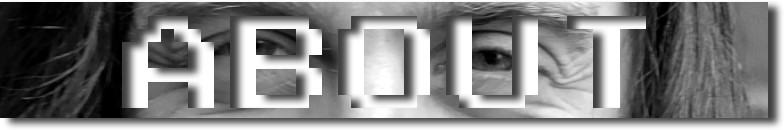
<style>
.page{position:relative;width:784px;height:130px}
.page>*{position:absolute;margin:0}
.t1{font:105.3px "PressStart2P";letter-spacing:0.025em}
</style>
<div class="page">
<p class="t1" style="left:122px;top:16px;width:524px;height:92px">ABOUT</p>
</div>
